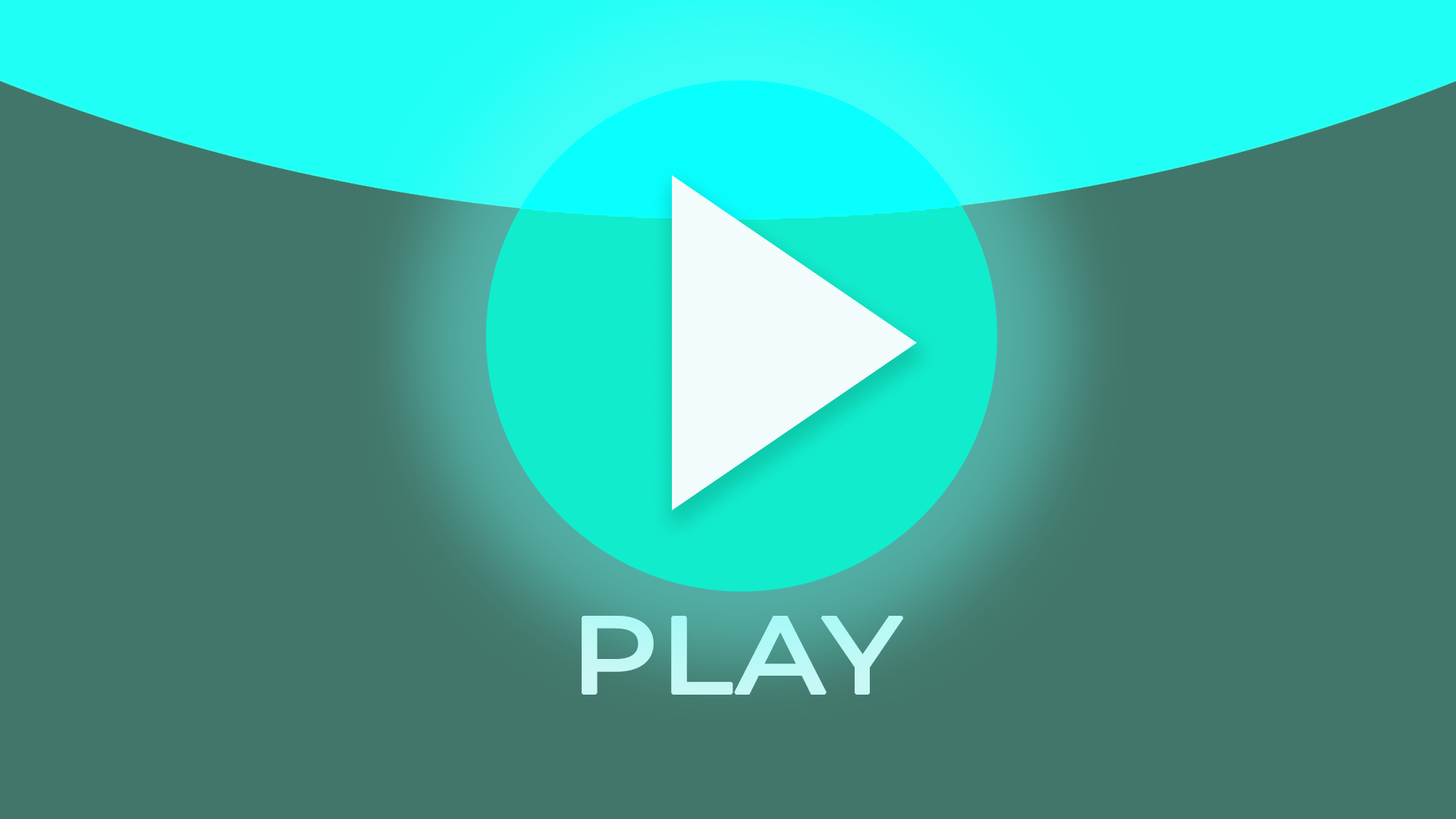
<style>
.page{position:relative;width:1456px;height:819px;background:#42766a}
.page>*{position:absolute;margin:0}
.t1{font:108px "Montserrat-Medium";color:#ccf8f6;font-weight:bold;scale:1.12 1}
</style>
<div class="page">
<p class="t1" style="left:582px;top:616px;width:322px;height:79px">PLAY</p>
</div>
